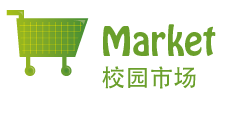
<style>
.page{position:relative;width:240px;height:140px;background:#ffffff}
.page>*{position:absolute;margin:0}
.t1{font:36px "HoboStd";color:#6a9f2b}
.t2{font:24px "AdobeHeitiStd-Regular";color:#6a9f2b}
</style>
<div class="page">
<p class="t1" style="left:103px;top:24px;width:113px;height:32px">Market</p>
<p class="t2" style="left:102px;top:66px;width:94px;height:23px">校园市场</p>
</div>
